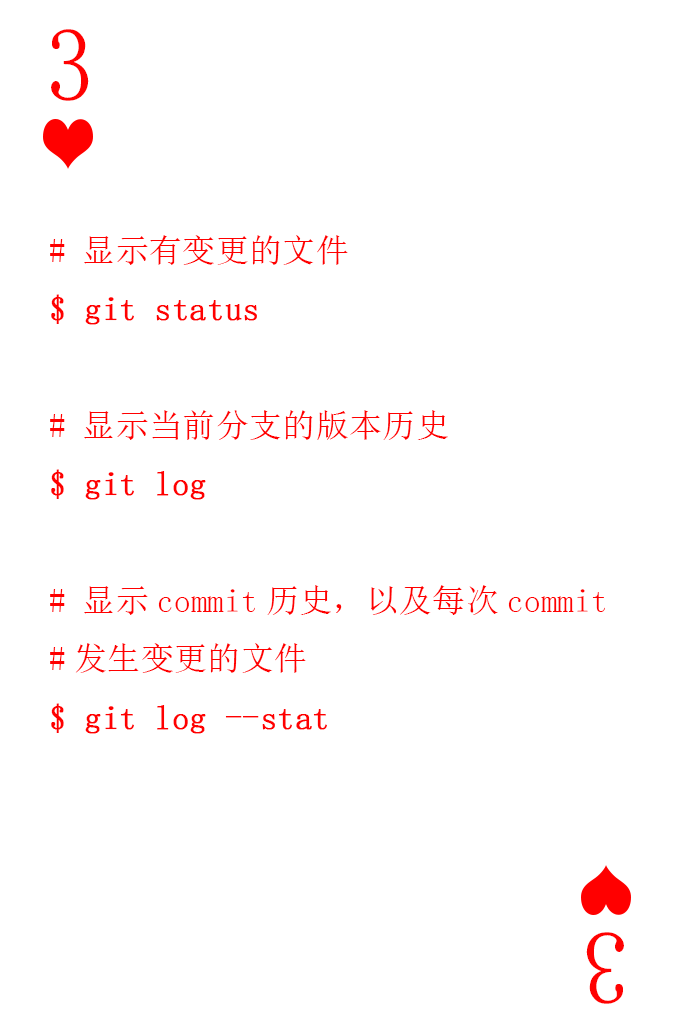
<style>
.page{position:relative;width:673px;height:1028px;background:#ffffff}
.page>*{position:absolute;margin:0}
.t1{font:104.2px "SimSun-ExtB";color:#ff0101;scale:0.93 1}
.t2{font:33.3px "SimSun";color:#ff0000}
.t3{font:33.3px "SimSun";color:#ff0000;font-weight:bold}
</style>
<div class="page">
<p class="t1" style="left:51px;top:29px;width:38px;height:72px">3</p>
<p class="t2" style="left:50px;top:235px;width:555px;height:499px"># 显示有变更的文件<br><span class="t3">$ git status<br></span><br># 显示当前分支的版本历史<br><span class="t3">$ git log<br></span><br># 显示commit历史，以及每次commit<br>#发生变更的文件<br><span class="t3">$ git log --stat</span></p>
<p class="t1" style="left:586px;top:932px;width:38px;height:72px;rotate:180deg">3</p>
</div>
